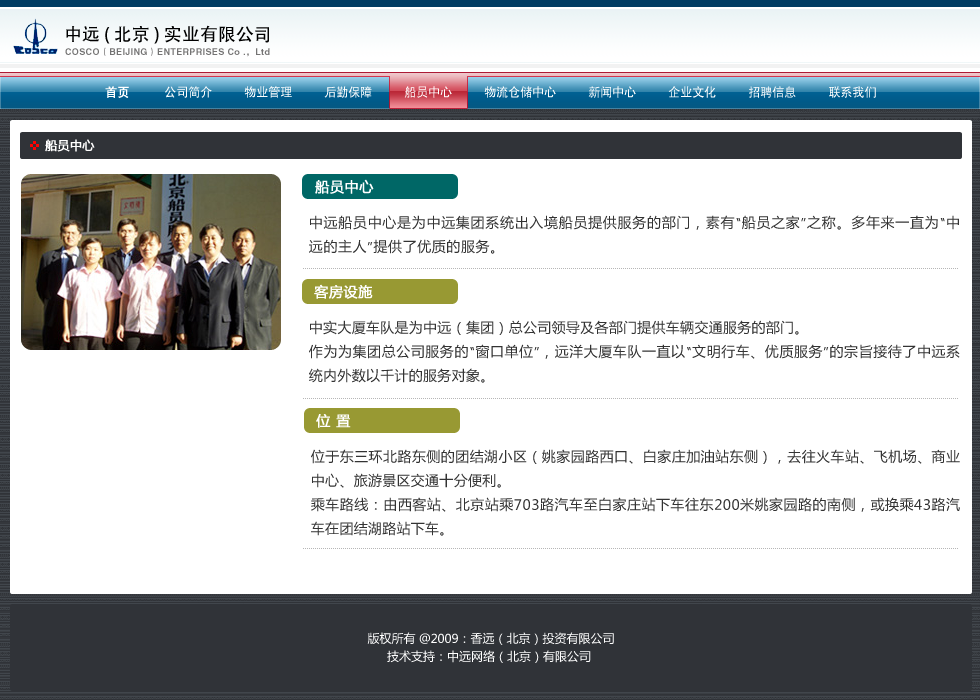
<style>
.page{position:relative;width:980px;height:700px;background:#ffffff}
.page>*{position:absolute;margin:0}
.t1{font:18px "AdobeHeitiStd-Regular";color:#000000}
.t2{font:9px "HelveticaLTStd-Bold";letter-spacing:0.04em;color:#747373}
.t3{font:9px "FZDHTJW--GB1-0";letter-spacing:0.04em;color:#747373}
.t4{font:12px "SIL-Hei-Med-Jian";color:#ffffff}
.t5{font:12px "SIL-Hei-Med-Jian";color:#ffffff;font-weight:bold}
.t6{font:12px "MicrosoftYaHei";color:#ffffff;font-weight:bold}
.t7{font:14px "MicrosoftYaHei";letter-spacing:0.02em;color:#ffffff;font-weight:bold}
.t8{font:14px/24px "MicrosoftYaHei";letter-spacing:0.04em;color:#333333}
.t9{font:14px/24px "MicrosoftYaHei";letter-spacing:0.02em;color:#333333}
.t10{font:12px/18px "MicrosoftYaHei";color:#ffffff}
</style>
<div class="page">
<p class="t1" style="left:66px;top:25px;width:203px;height:19px">中远 ( 北京 ) 实业有限公司</p>
<p class="t2" style="left:65px;top:47px;width:205px;height:10px">COSCO<span class="t3">（</span>BEIJING<span class="t3">）</span>ENTERPRISES Co .<span class="t3">，</span>Ltd</p>
<p class="t4" style="left:105px;top:86px;width:771px;height:12px"><span class="t5">首页        </span>公司简介        物业管理        后勤保障        船员中心        物流仓储中心        新闻中心        企业文化        招聘信息        联系我们</p>
<p class="t6" style="left:45px;top:139px;width:50px;height:13px">船员中心</p>
<p class="t7" style="left:315px;top:179px;width:59px;height:15px">船员中心</p>
<p class="t8" style="left:309px;top:215px;width:650px;height:39px;text-align:justify">中远船员中心是为中远集团系统出入境船员提供服务的部门，素有“船员之家”之称。多年来一直为“中远的主人”提供了优质的服务。</p>
<p class="t7" style="left:314px;top:284px;width:59px;height:15px">客房设施</p>
<p class="t9" style="left:309px;top:320px;width:651px;height:63px;text-align:justify">中实大厦车队是为中远（集团）总公司领导及各部门提供车辆交通服务的部门。<br>作为为集团总公司服务的“窗口单位”，远洋大厦车队一直以“文明行车、优质服务”的宗旨接待了中远系统内外数以千计的服务对象。</p>
<p class="t7" style="left:316px;top:414px;width:35px;height:14px">位 置</p>
<p class="t9" style="left:311px;top:449px;width:649px;height:87px;text-align:justify">位于东三环北路东侧的团结湖小区（姚家园路西口、白家庄加油站东侧），去往火车站、飞机场、商业中心、旅游景区交通十分便利。<br>乘车路线：由西客站、北京站乘703路汽车至白家庄站下车往东200米姚家园路的南侧，或换乘43路汽车在团结湖路站下车。</p>
<p class="t10" style="left:367px;top:632px;width:247px;height:31px;text-align:center">版权所有 @2009：香远（北京）投资有限公司<br>技术支持：中远网络（北京）有限公司</p>
</div>
